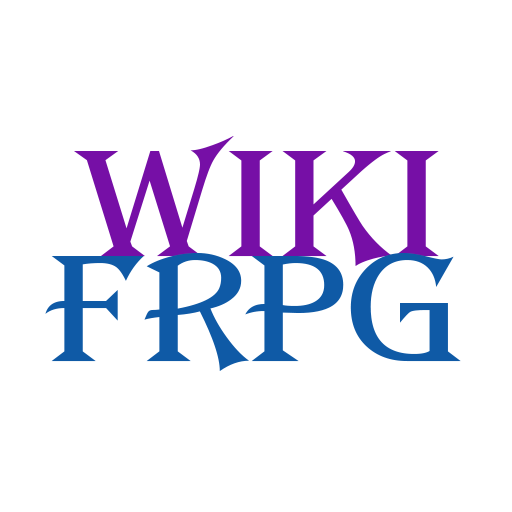
<style>
.page{position:relative;width:512px;height:512px;background:#ffffff}
.page>*{position:absolute;margin:0}
.t1{font:150px "AAlgerius";color:#760fa6}
.t2{font:150px "AAlgerius";color:#0f5aa6}
</style>
<div class="page">
<p class="t1" style="left:74px;top:136px;width:365px;height:130px">WiKi</p>
<p class="t2" style="left:45px;top:253px;width:416px;height:118px">FRPG</p>
</div>
